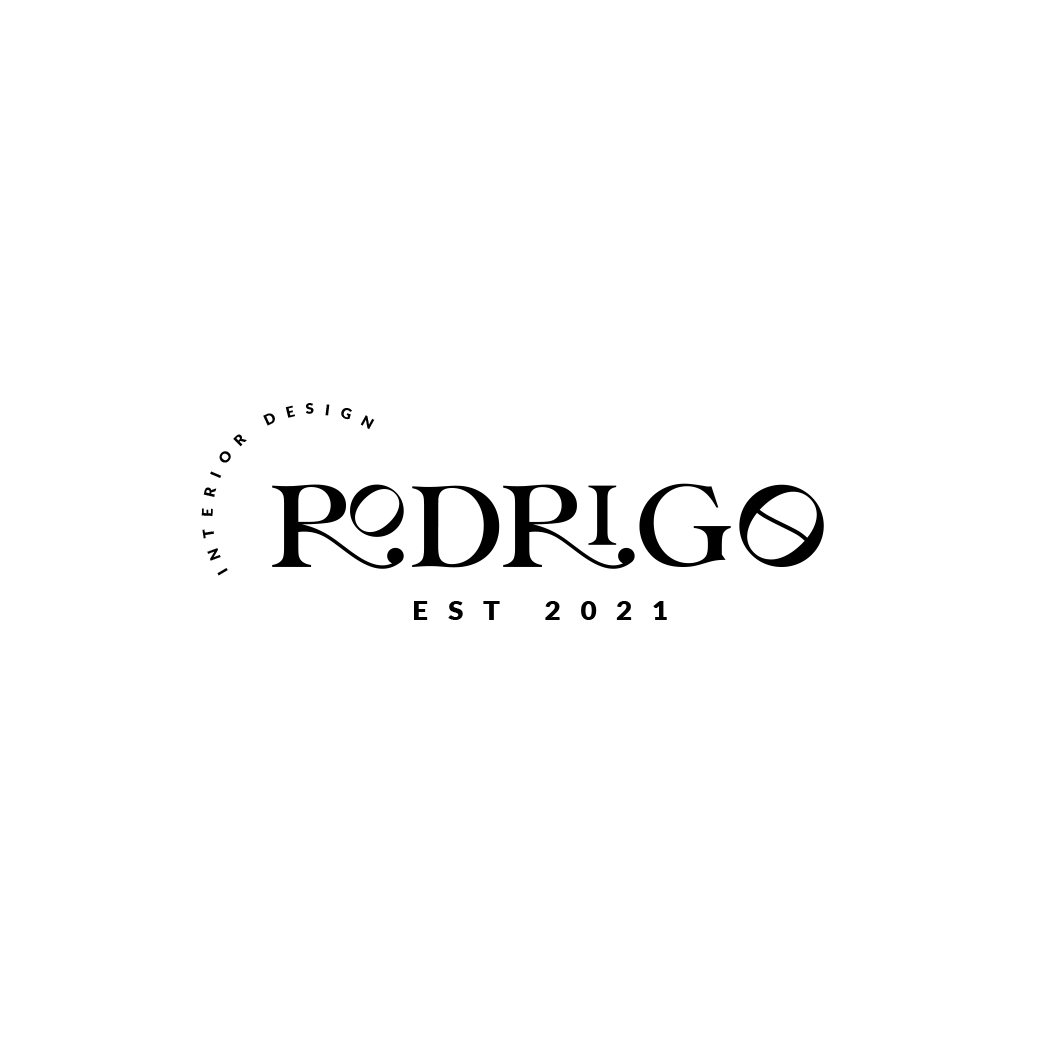
<style>
.page{position:relative;width:1042px;height:1042px;background:#ffffff}
.page>*{position:absolute;margin:0}
.t1{font:14.6px "Lato-Black";letter-spacing:0.7em;color:#000000;text-transform:uppercase}
.t2{font:116.4px "LorettoRegular";color:#000000;text-transform:uppercase}
.t3{font:27.3px "Lato-Black";letter-spacing:0.7em;color:#000000;text-transform:uppercase}
</style>
<div class="page">
<p class="t1" style="left:201px;top:403px;width:174px;height:173px;text-align:center">INTERIOR DESIGN</p>
<p class="t2" style="left:272px;top:483px;width:552px;height:86px">RODRIGO</p>
<p class="t3" style="left:414px;top:601px;width:253px;height:19px">EST 2021</p>
</div>
